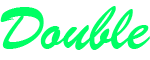
<style>
.page{position:relative;width:150px;height:60px;background:#ffffff}
.page>*{position:absolute;margin:0}
.t1{font:60px "BrushScript-BT";color:#00ff64}
</style>
<div class="page">
<p class="t1" style="left:0px;top:6px;width:150px;height:44px">Double</p>
</div>
